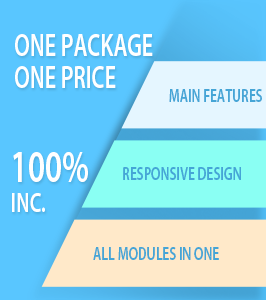
<style>
.page{position:relative;width:266px;height:300px;background:#59c6ff}
.page>*{position:absolute;margin:0}
.t1{font:31.5px/24px "MyriadPro-Semibold";color:#ffffff;text-transform:uppercase;scale:0.7 1}
.t2{font:18.9px "MyriadPro-Semibold";color:#45a5d6;text-transform:uppercase;scale:0.7 1}
.t3{font:45.4px/30px "MyriadPro-Semibold";color:#ffffff;text-transform:uppercase;scale:0.7 1}
.t4{font:28.4px/30px "MyriadPro-Semibold";color:#ffffff;text-transform:uppercase;scale:0.7 1}
</style>
<div class="page">
<p class="t1" style="left:15px;top:34px;width:138px;height:54px">One package<br>one price</p>
<p class="t2" style="left:169px;top:89px;width:93px;height:13px">main features</p>
<p class="t3" style="left:12px;top:152px;width:76px;height:60px">100% <br><span class="t4">inc.</span></p>
<p class="t2" style="left:123px;top:167px;width:118px;height:13px">responsive design</p>
<p class="t2" style="left:93px;top:247px;width:126px;height:13px">all modules in one</p>
</div>
